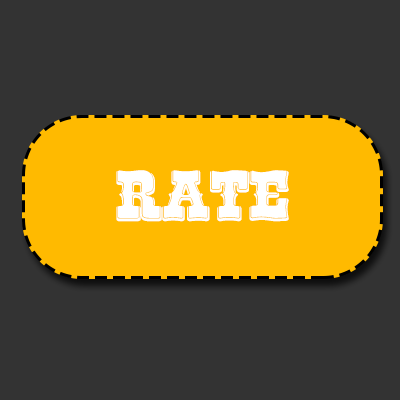
<style>
.page{position:relative;width:400px;height:400px;background:#333333}
.page>*{position:absolute;margin:0}
.t1{font:72.4px "RioGrande-Bold";color:#ffffff}
</style>
<div class="page">
<p class="t1" style="left:116px;top:170px;width:173px;height:52px">Rate</p>
</div>
